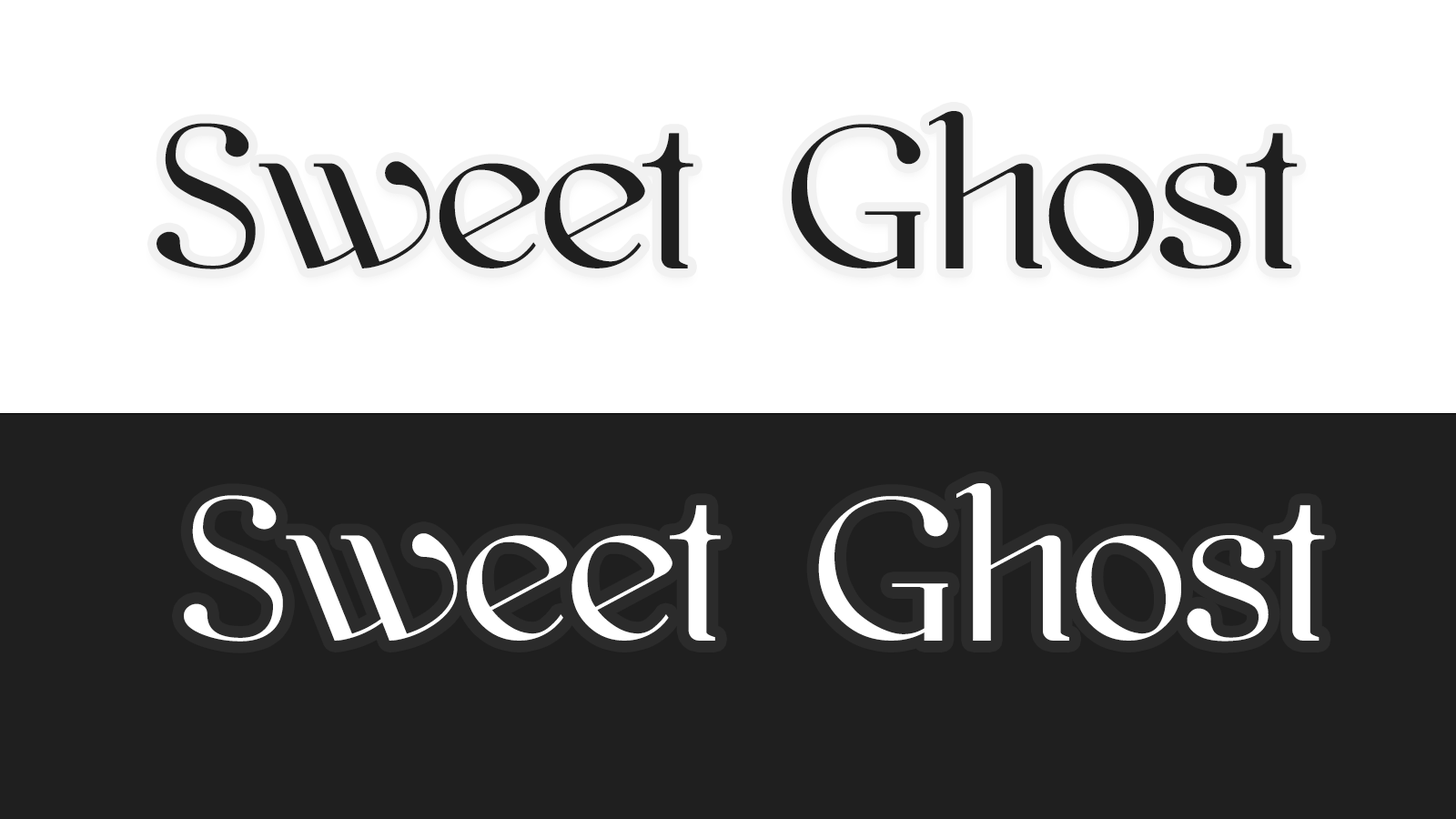
<style>
.page{position:relative;width:1456px;height:819px;background:#ffffff}
.page>*{position:absolute;margin:0}
.t1{font:218.4px "kawoszeh";color:#1f1f1f}
.t2{font:218.4px "kawoszeh";color:#ffffff}
</style>
<div class="page">
<p class="t1" style="left:157px;top:111px;width:1141px;height:158px">Sweet Ghost</p>
<p class="t2" style="left:184px;top:483px;width:1141px;height:159px">Sweet Ghost</p>
</div>
